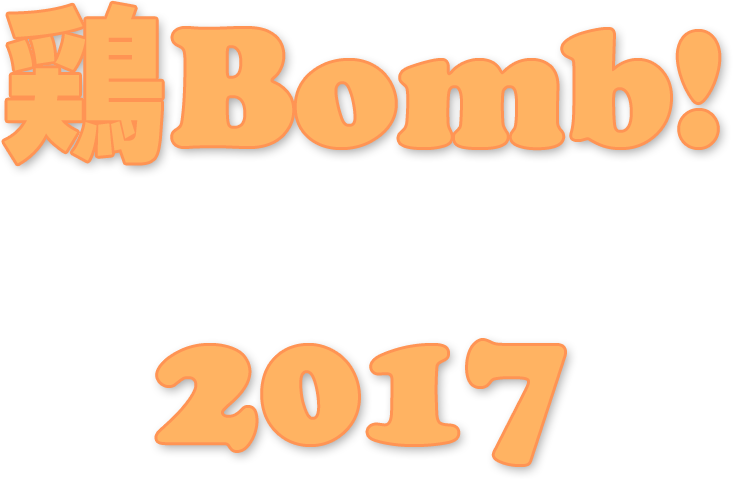
<style>
.page{position:relative;width:736px;height:483px;background:#ffffff}
.page>*{position:absolute;margin:0}
.t1{font:172px "CooperBlack";color:#ffb362}
.t2{font:172px "HGSoeiKakugothicUB";color:#ffb362}
</style>
<div class="page">
<p class="t1" style="left:4px;top:3px;width:715px;height:461px;text-align:center"><span class="t2">鶏</span>Bomb!<br>2017</p>
</div>
